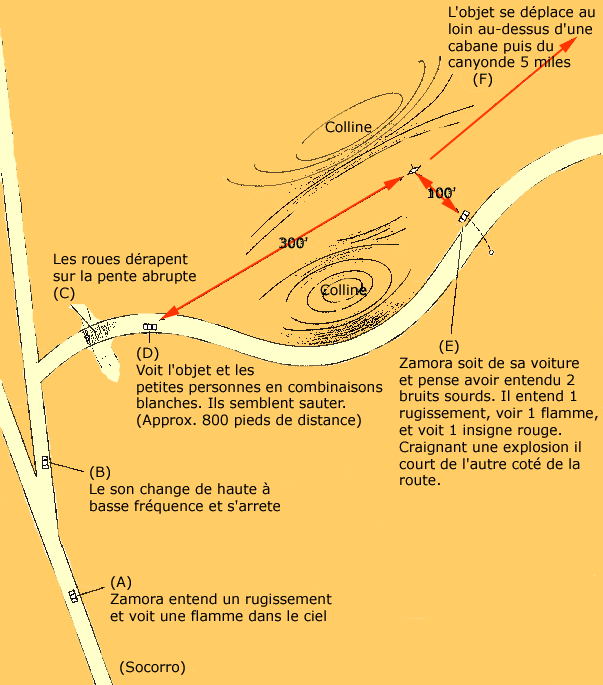
<style>
.page{position:relative;width:603px;height:685px;background:#ffcc66}
.page>*{position:absolute;margin:0}
.t1{font:14px "Verdana";color:#000000}
</style>
<div class="page">
<p class="t1" style="left:448px;top:6px;width:147px;height:81px">L'objet se déplace au<br>loin au-dessus d'une <br>cabane puis du <br>canyonde 5 miles<br>     (F)</p>
<p class="t1" style="left:325px;top:121px;width:47px;height:12px">Colline</p>
<p class="t1" style="left:428px;top:187px;width:28px;height:12px">100'</p>
<p class="t1" style="left:279px;top:237px;width:29px;height:12px">300'</p>
<p class="t1" style="left:53px;top:253px;width:143px;height:48px">Les roues dérapent<br>sur la pente abrupte<br>(C)</p>
<p class="t1" style="left:320px;top:284px;width:47px;height:12px">Colline</p>
<p class="t1" style="left:399px;top:340px;width:199px;height:146px">(E)<br>Zamora soit de sa voiture<br>et pense avoir entendu 2<br>bruits sourds. Il entend 1<br>rugissement, voir 1 flamme,<br>et voit 1 insigne rouge.<br>Craignant une explosion il <br>court de l'autre coté de la<br>route.</p>
<p class="t1" style="left:136px;top:347px;width:247px;height:81px">(D)<br>Voit l'objet et les<br>petites personnes en combinaisons<br>blanches. Ils semblent sauter.<br>(Approx. 800 pieds de distance)</p>
<p class="t1" style="left:90px;top:466px;width:190px;height:48px">(B)<br>Le son change de haute à<br>basse fréquence et s'arrete</p>
<p class="t1" style="left:110px;top:576px;width:222px;height:46px">(A)<br>Zamora entend un rugissement<br>et voit une flamme dans le ciel</p>
<p class="t1" style="left:120px;top:661px;width:65px;height:14px">(Socorro)</p>
</div>
